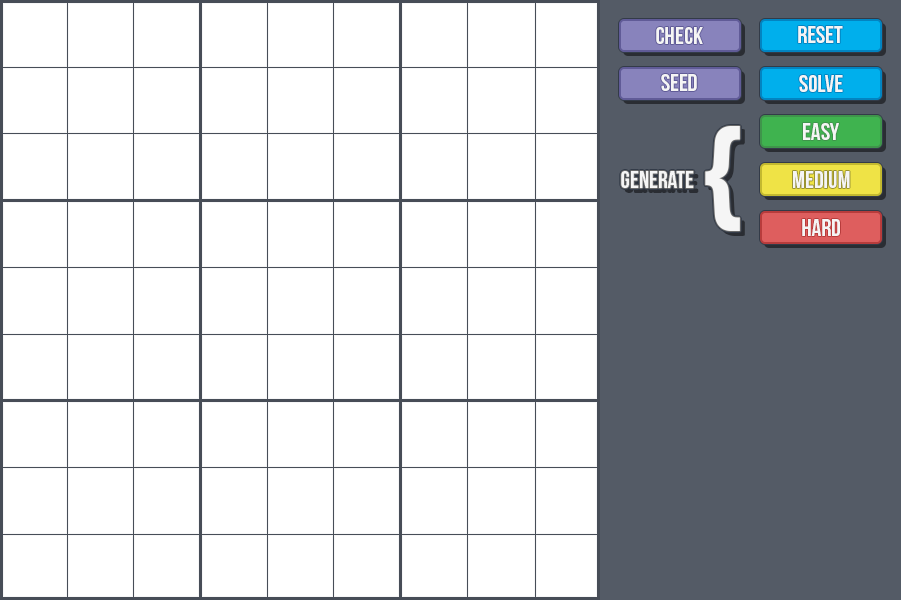
<style>
.page{position:relative;width:901px;height:600px;background:#ffffff}
.page>*{position:absolute;margin:0}
.t1{font:24px "BebasNeue";color:#f5f5f5}
.t2{font:150px "BebasNeue";color:#f5f5f5}
</style>
<div class="page">
<p class="t1" style="left:656px;top:27px;width:47px;height:17px">Check</p>
<p class="t1" style="left:798px;top:26px;width:45px;height:17px">Reset</p>
<p class="t1" style="left:661px;top:74px;width:36px;height:17px">seed</p>
<p class="t1" style="left:799px;top:75px;width:44px;height:17px">Solve</p>
<p class="t2" style="left:705px;top:126px;width:35px;height:105px">{</p>
<p class="t1" style="left:803px;top:123px;width:36px;height:17px">easy</p>
<p class="t1" style="left:621px;top:171px;width:73px;height:17px">Generate</p>
<p class="t1" style="left:793px;top:171px;width:57px;height:17px">medium</p>
<p class="t1" style="left:802px;top:219px;width:38px;height:17px">hard</p>
</div>
